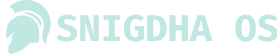
<style>
.page{position:relative;width:277px;height:54px;background:#ffffff}
.page>*{position:absolute;margin:0}
.t1{font:37.2px "FiraCode-Bold";color:#c1e7e3}
</style>
<div class="page">
<p class="t1" style="left:56px;top:14px;width:222px;height:28px">SNIGDHA OS</p>
</div>
